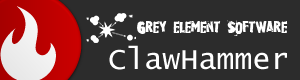
<style>
.page{position:relative;width:300px;height:80px;background:#2c2c2c}
.page>*{position:absolute;margin:0}
.t1{font:14px "RubbermaidSingle";color:#ffffff}
.t2{font:30px "LucidaConsole";color:#ffffff}
</style>
<div class="page">
<p class="t1" style="left:137px;top:20px;width:151px;height:16px">Grey element Software</p>
<p class="t2" style="left:109px;top:45px;width:178px;height:25px">ClawHammer</p>
</div>
